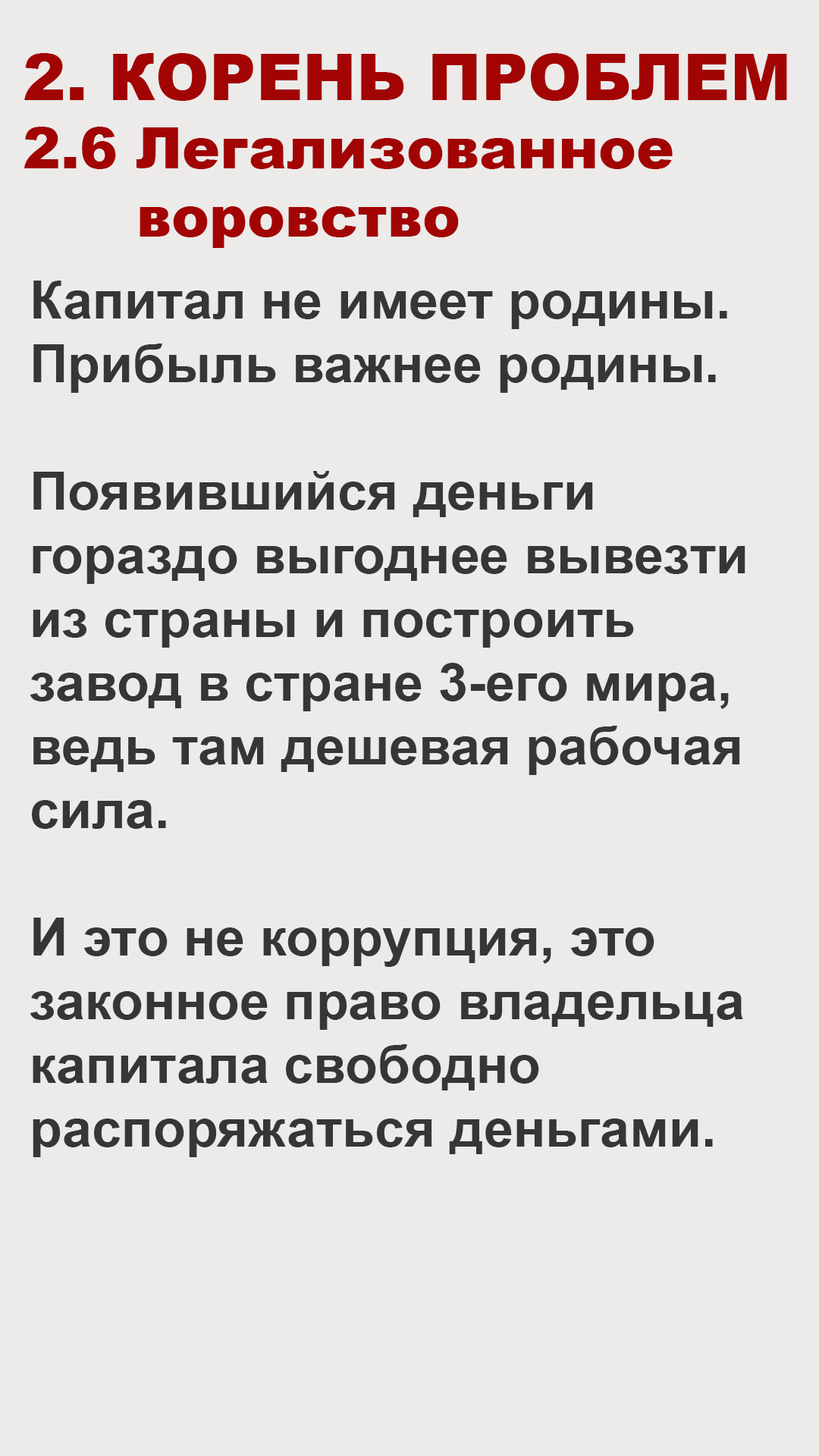
<style>
.page{position:relative;width:819px;height:1456px;background:#ecebe9}
.page>*{position:absolute;margin:0}
.t1{font:56.9px "Arial-Black";color:#a20403}
.t2{font:64.5px "Arial-Black";color:#a20403}
.t3{font:53.1px "Arial-BoldMT";color:#373634}
</style>
<div class="page">
<p class="t1" style="left:24px;top:53px;width:763px;height:195px"><span class="t2">2. КОРЕНЬ ПРОБЛЕМ<br></span>2.6 Легализованное<br>      воровство</p>
<p class="t3" style="left:30px;top:281px;width:715px;height:876px">Капитал не имеет родины.<br>Прибыль важнее родины.<br><br>Появившийся деньги<br>гораздо выгоднее вывезти<br>из страны и построить<br>завод в стране 3-его мира,<br>ведь там дешевая рабочая<br>сила.<br><br>И это не коррупция, это<br>законное право владельца<br>капитала свободно<br>распоряжаться деньгами.</p>
</div>
